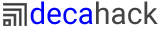
<style>
.page{position:relative;width:160px;height:30px;background:#ffffff}
.page>*{position:absolute;margin:0}
.t1{font:30px "Roboto-Regular";color:#0000ff}
.t2{font:30px "Roboto-Regular";color:#444444}
</style>
<div class="page">
<p class="t1" style="left:30px;top:1px;width:128px;height:24px">deca<span class="t2">hack</span></p>
</div>
